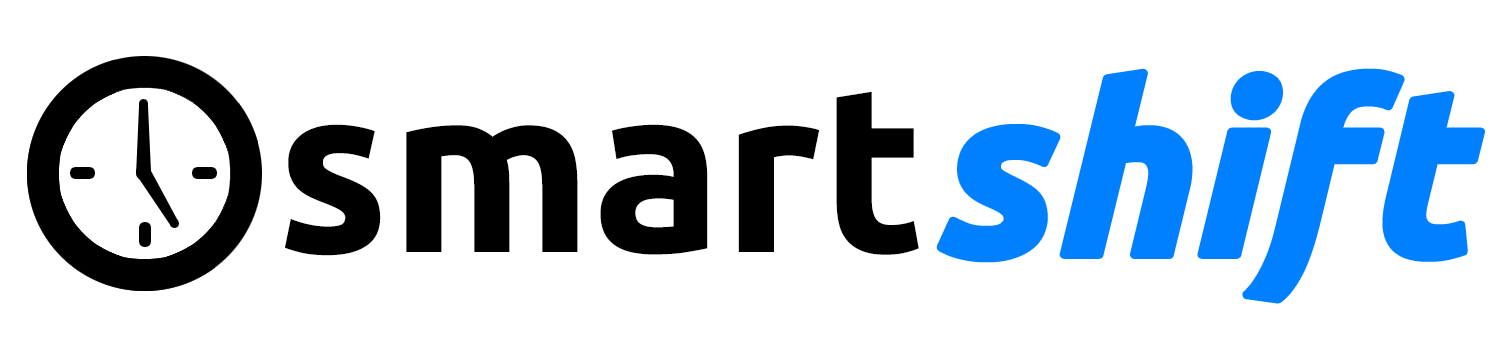
<style>
.page{position:relative;width:1500px;height:354px;background:#ffffff}
.page>*{position:absolute;margin:0}
.t1{font:235px "Ubuntu-BoldItalic";letter-spacing:0.01em;color:#0080ff}
.t2{font:235px "Ubuntu-Bold";color:#000000}
</style>
<div class="page">
<p class="t1" style="left:940px;top:72px;width:542px;height:228px">shift</p>
<p class="t2" style="left:285px;top:91px;width:634px;height:165px">smart</p>
</div>
